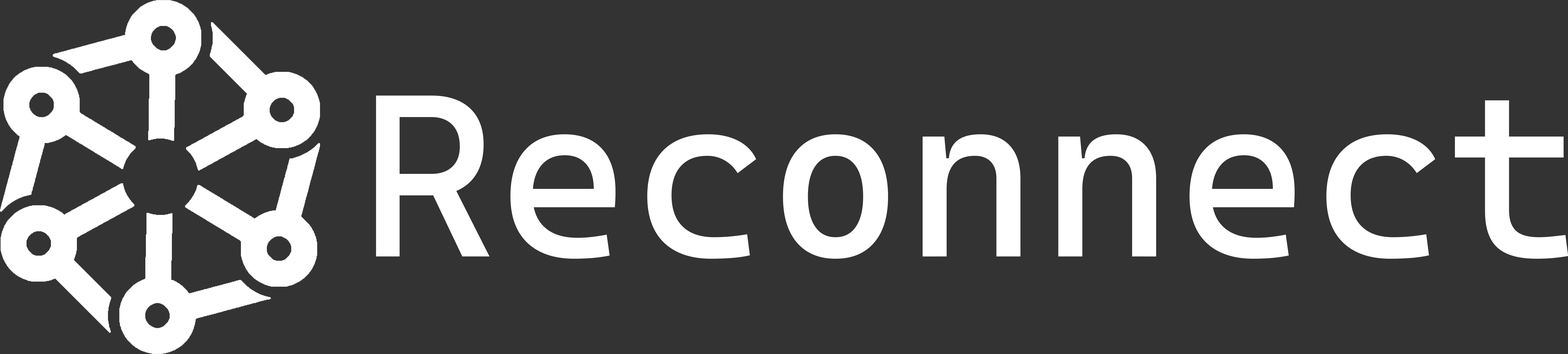
<style>
.page{position:relative;width:1568px;height:354px;background:#333333}
.page>*{position:absolute;margin:0}
.t1{font:231.8px "CascadiaCode-Regular";color:#ffffff}
</style>
<div class="page">
<p class="t1" style="left:376px;top:95px;width:1192px;height:164px">Reconnect</p>
</div>
